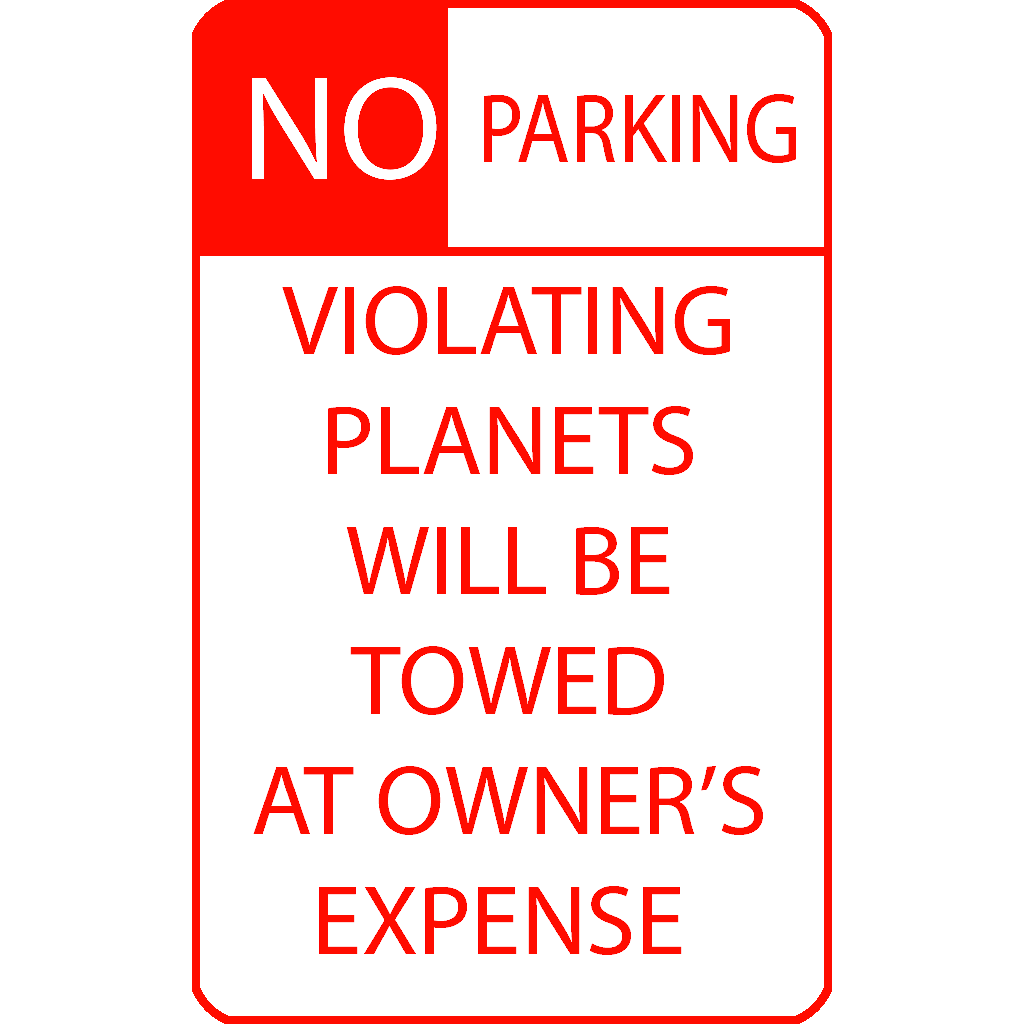
<style>
.page{position:relative;width:1024px;height:1024px;background:#ffffff}
.page>*{position:absolute;margin:0}
.t1{font:150px "MyriadPro-Regular";color:#ffffff}
.t2{font:100px "MyriadPro-Regular";color:#ff0c00;scale:0.88 1}
.t3{font:100px "MyriadPro-Regular";color:#ff0c00}
</style>
<div class="page">
<p class="t1" style="left:251px;top:76px;width:186px;height:105px">NO</p>
<p class="t2" style="left:484px;top:94px;width:312px;height:69px">PARKING</p>
<p class="t3" style="left:253px;top:286px;width:510px;height:669px;text-align:center">VIOLATING<br>PLANETS<br>WILL BE<br>TOWED<br>AT OWNER’S<br>EXPENSE</p>
</div>
